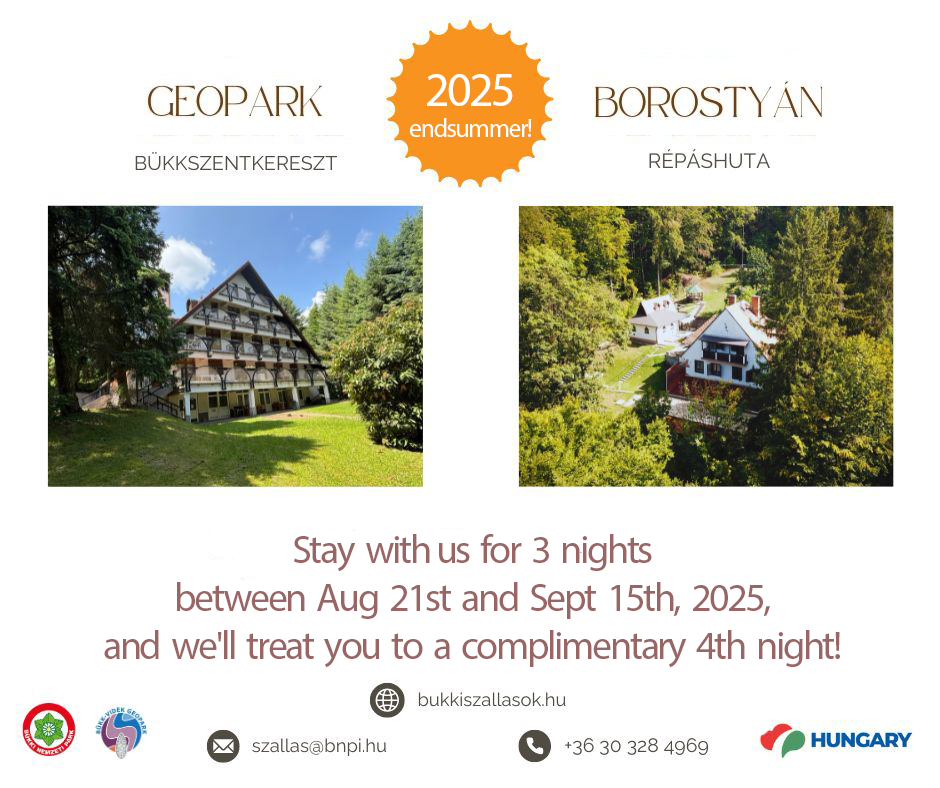
<style>
.page{position:relative;width:940px;height:788px;background:#ffffff}
.page>*{position:absolute;margin:0}
.t1{font:26px "MyriadPro-Regular";letter-spacing:-0.06em;color:#ffffff}
.t2{font:48px "MyriadPro-Regular";letter-spacing:-0.06em;color:#ffffff}
.t3{font:40px "MyriadPro-Regular";letter-spacing:-0.06em;color:#996666}
</style>
<div class="page">
<p class="t1" style="left:410px;top:74px;width:122px;height:63px;text-align:center"><span class="t2">2025<br></span>endsummer!</p>
<p class="t3" style="left:104px;top:534px;width:736px;height:134px;text-align:center">Stay with us for 3 nights<br>between Aug 21st and Sept 15th, 2025,<br>and we'll treat you to a complimentary 4th night!</p>
</div>
